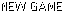
<style>
.page{position:relative;width:62px;height:12px;background:#ffffff}
.page>*{position:absolute;margin:0}
.t1{font:12px "Geneva";color:#000000}
</style>
<div class="page">
<p class="t1" style="left:2px;top:2px;width:60px;height:9px">NEW GAME</p>
</div>
